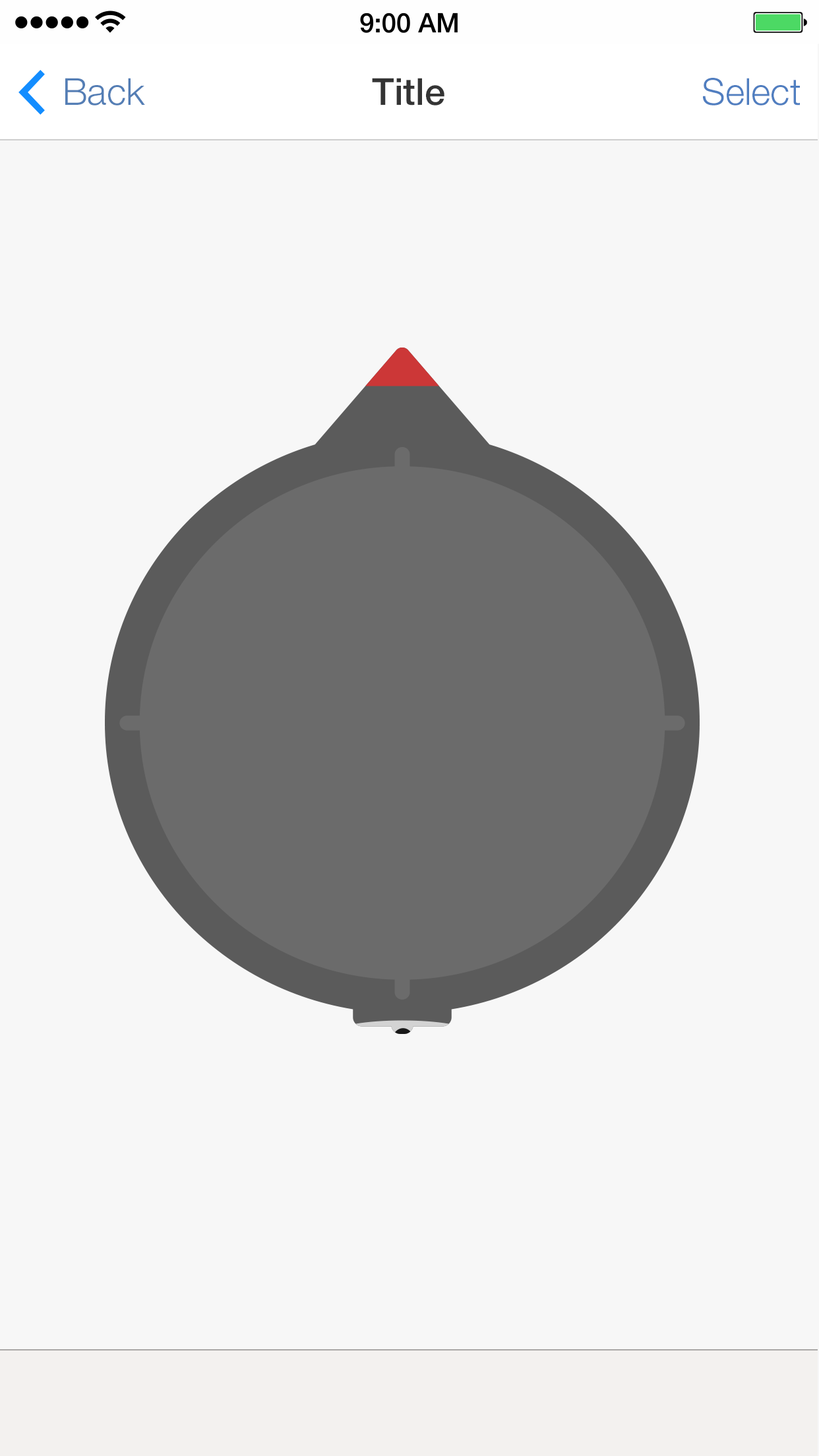
<style>
.page{position:relative;width:819px;height:1456px;background:#f7f7f7}
.page>*{position:absolute;margin:0}
.t1{font:37.1px "HelveticaNeue-Light";color:#547eb5}
.t2{font:37.1px "HelveticaNeue-Medium";color:#343434}
.t3{font:37.1px "HelveticaNeue-Light";color:#507ec0}
</style>
<div class="page">
<p class="t1" style="left:65px;top:78px;width:80px;height:28px">Back</p>
<p class="t2" style="left:372px;top:78px;width:72px;height:28px">Title</p>
<p class="t3" style="left:703px;top:78px;width:97px;height:28px">Select</p>
</div>
